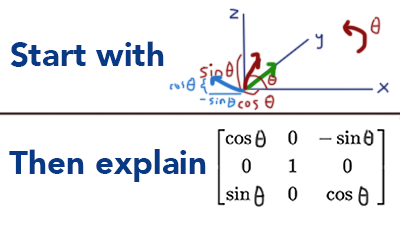
<style>
.page{position:relative;width:400px;height:225px;background:#ffffff}
.page>*{position:absolute;margin:0}
.t1{font:33px "Avenir-Black";color:#073985}
</style>
<div class="page">
<p class="t1" style="left:10px;top:41px;width:154px;height:26px">Start with</p>
<p class="t1" style="left:9px;top:149px;width:197px;height:33px">Then explain</p>
</div>
